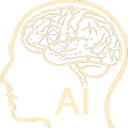
<style>
.page{position:relative;width:128px;height:128px;background:#ffffff}
.page>*{position:absolute;margin:0}
.t1{font:36px "MicrosoftSansSerif";color:#ffedc2;font-weight:bold}
</style>
<div class="page">
<p class="t1" style="left:54px;top:88px;width:34px;height:27px">AI</p>
</div>
